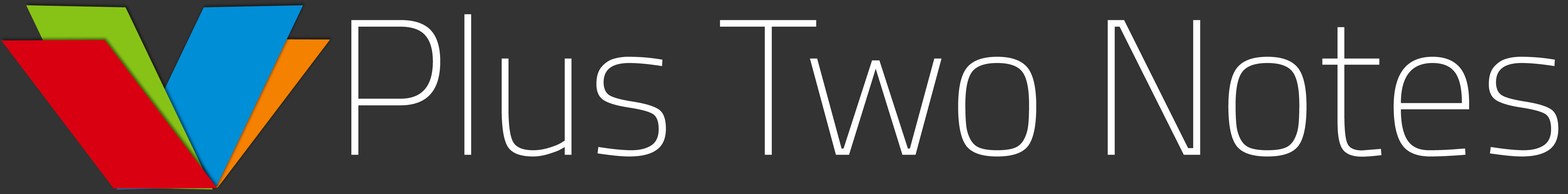
<style>
.page{position:relative;width:1568px;height:194px;background:#333333}
.page>*{position:absolute;margin:0}
.t1{font:192.2px "TitilliumWeb-Thin";color:#ffffff}
</style>
<div class="page">
<p class="t1" style="left:351px;top:14px;width:1208px;height:143px">Plus Two Notes</p>
</div>
